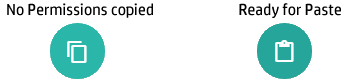
<style>
.page{position:relative;width:350px;height:80px;background:#ffffff}
.page>*{position:absolute;margin:0}
.t1{font:16px "HPSimplified-Regular";color:#000000}
.t2{font:12px "HPSimplified-Regular";color:#000000}
</style>
<div class="page">
<p class="t1" style="left:7px;top:3px;width:146px;height:15px">No Permissions copied</p>
<p class="t2" style="left:239px;top:3px;width:102px;height:15px">Ready for Paste</p>
</div>
